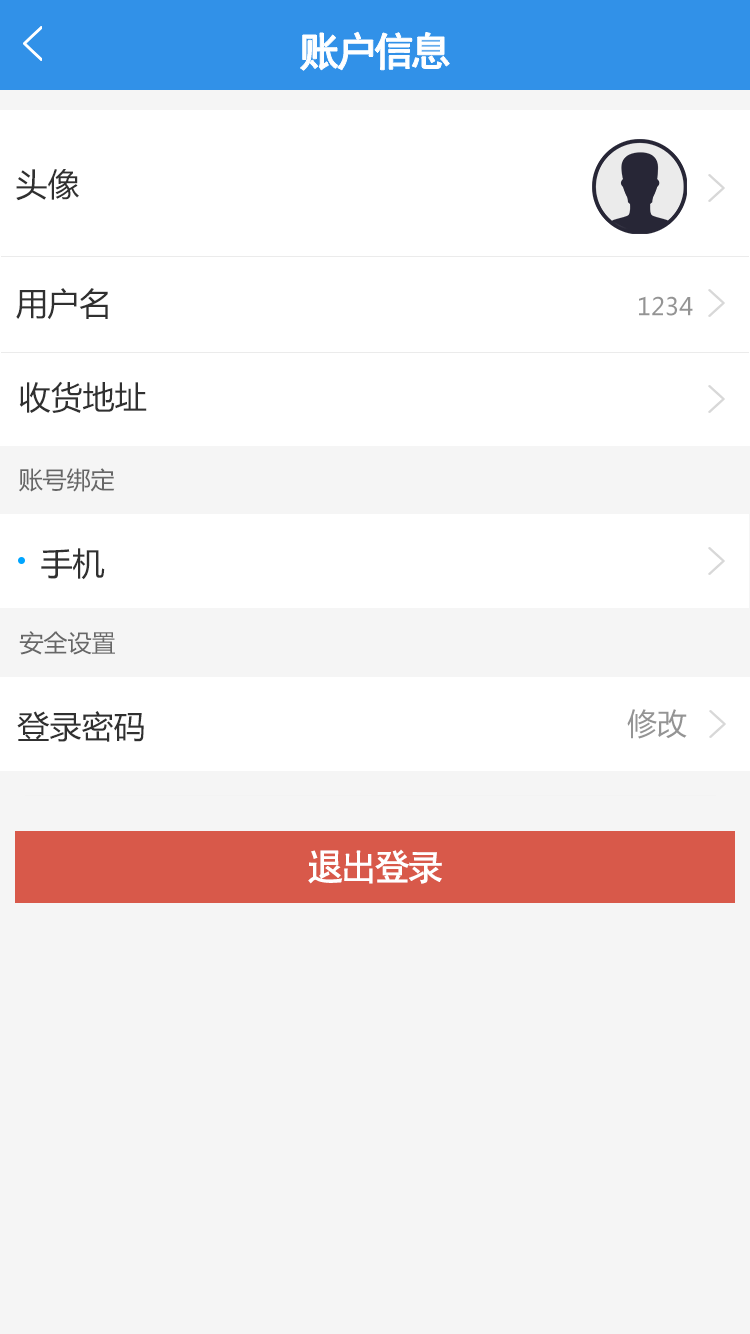
<style>
.page{position:relative;width:750px;height:1334px;background:#f5f5f5}
.page>*{position:absolute;margin:0}
.t1{font:40px "SimHei";letter-spacing:-0.1em;color:#ffffff;font-weight:bold}
.t2{font:32px "MicrosoftYaHei";color:#303030}
.t3{font:24px "MicrosoftYaHei";color:#949494}
.t4{font:24px "MicrosoftYaHei";color:#676767}
.t5{font:30px "MicrosoftYaHei";color:#949494}
.t6{font:36px "SimHei";letter-spacing:-0.1em;color:#ffffff;font-weight:bold}
</style>
<div class="page">
<p class="t1" style="left:300px;top:32px;width:150px;height:39px">账户信息</p>
<p class="t2" style="left:16px;top:169px;width:63px;height:32px">头像</p>
<p class="t2" style="left:16px;top:288px;width:92px;height:32px">用户名</p>
<p class="t3" style="left:639px;top:296px;width:54px;height:20px">1234</p>
<p class="t2" style="left:19px;top:381px;width:128px;height:32px">收货地址</p>
<p class="t4" style="left:19px;top:468px;width:96px;height:24px">账号绑定</p>
<p class="t2" style="left:41px;top:548px;width:64px;height:32px">手机</p>
<p class="t4" style="left:19px;top:631px;width:96px;height:24px">安全设置</p>
<p class="t2" style="left:17px;top:711px;width:127px;height:31px">登录密码</p>
<p class="t5" style="left:627px;top:709px;width:60px;height:30px">修改</p>
<p class="t6" style="left:308px;top:849px;width:134px;height:35px">退出登录</p>
</div>
